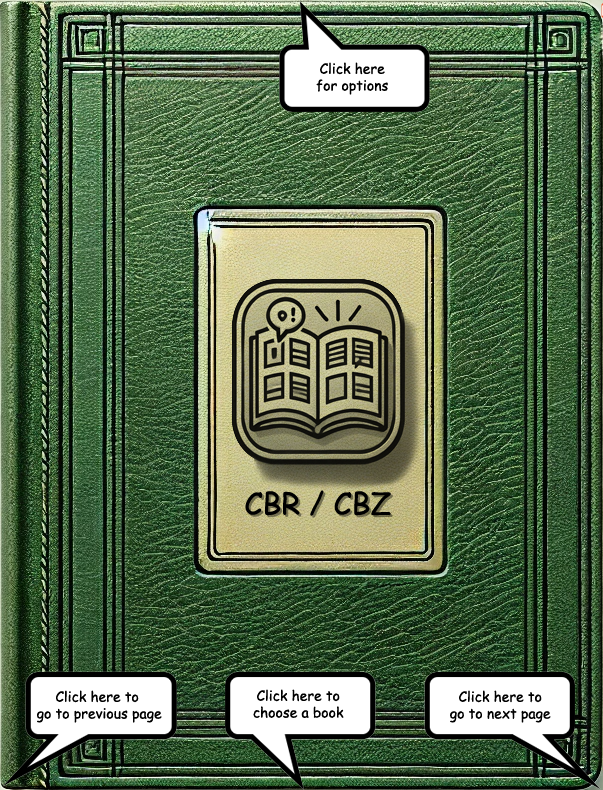
<style>
.page{position:relative;width:603px;height:790px}
.page>*{position:absolute;margin:0}
.t1{font:14px "ComicSansMS";color:#000000}
.t2{font:30px "ComicSansMS";color:#000000}
.t3{font:30px "ComicSansMS"}
</style>
<div class="page">
<p class="t1" style="left:316px;top:62px;width:72px;height:33px;text-align:center">Click here<br>for options</p>
<p class="t2" style="left:245px;top:490px;width:146px;height:26px">CBR / CBZ</p>
<p class="t3" style="left:247px;top:492px;width:146px;height:26px">CBR / CBZ</p>
<p class="t1" style="left:253px;top:689px;width:91px;height:29px;text-align:center">Click here to<br>choose a book</p>
<p class="t1" style="left:37px;top:690px;width:125px;height:33px;text-align:center">Click here to <br>go to previous page</p>
<p class="t1" style="left:450px;top:690px;width:101px;height:33px;text-align:center">Click here to<br>go to next page</p>
</div>
